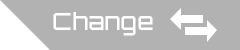
<style>
.page{position:relative;width:240px;height:50px;background:#b2b2b2}
.page>*{position:absolute;margin:0}
.t1{font:24px "Orbitron-Medium";color:#ffffff}
</style>
<div class="page">
<p class="t1" style="left:53px;top:12px;width:100px;height:24px">Change</p>
</div>
